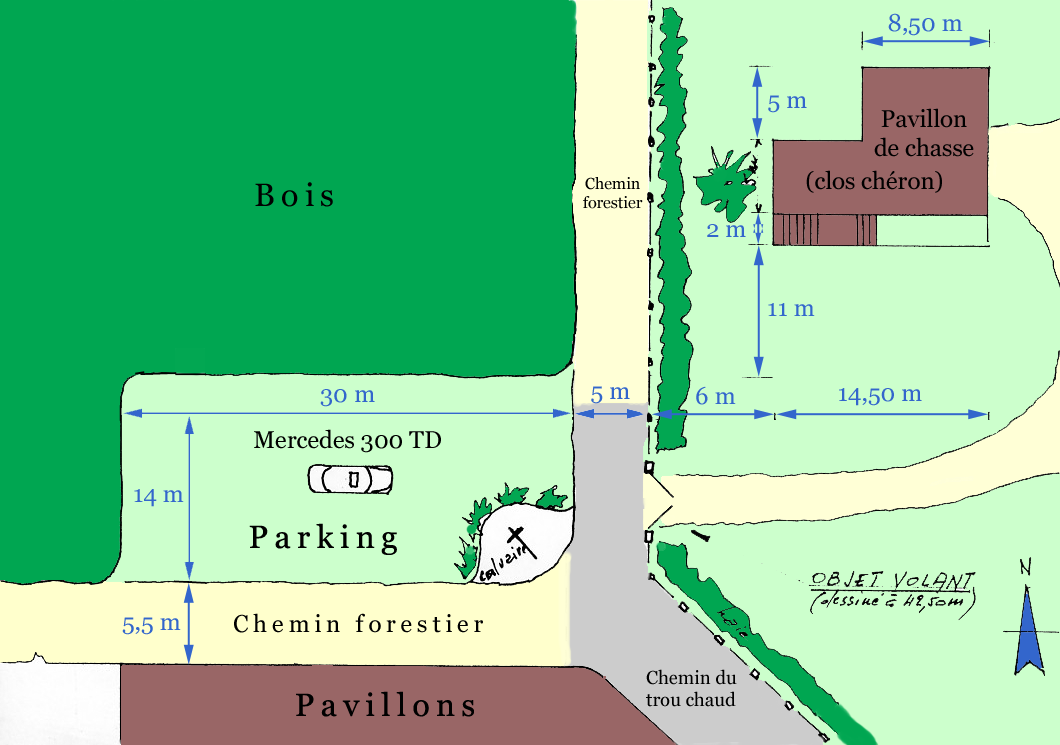
<style>
.page{position:relative;width:1060px;height:745px;background:#ccffcc}
.page>*{position:absolute;margin:0}
.t1{font:24px "Georgia";color:#3366cc}
.t2{font:24px "Georgia";color:#000000}
.t3{font:32px "Georgia";letter-spacing:0.2em;color:#000000}
.t4{font:16px "Georgia";color:#000000}
.t5{font:24px "Georgia";letter-spacing:0.2em;color:#000000}
.t6{font:18.7px "Georgia";color:#000000}
</style>
<div class="page">
<p class="t1" style="left:888px;top:13px;width:75px;height:23px">8,50 m</p>
<p class="t1" style="left:768px;top:95px;width:39px;height:18px">5 m</p>
<p class="t2" style="left:874px;top:108px;width:100px;height:49px;text-align:center">Pavillon<br>de chasse</p>
<p class="t2" style="left:806px;top:170px;width:136px;height:23px">(clos chéron)</p>
<p class="t3" style="left:255px;top:182px;width:78px;height:25px">Bois</p>
<p class="t4" style="left:583px;top:177px;width:60px;height:32px;text-align:center">Chemin<br>forestier</p>
<p class="t1" style="left:707px;top:224px;width:39px;height:13px">2 m</p>
<p class="t1" style="left:768px;top:303px;width:47px;height:13px">11 m</p>
<p class="t1" style="left:320px;top:389px;width:55px;height:18px">30 m</p>
<p class="t1" style="left:591px;top:386px;width:39px;height:18px">5 m</p>
<p class="t1" style="left:696px;top:386px;width:40px;height:19px">6 m</p>
<p class="t1" style="left:839px;top:388px;width:83px;height:18px">14,50 m</p>
<p class="t2" style="left:254px;top:429px;width:187px;height:24px">Mercedes 300 TD</p>
<p class="t1" style="left:134px;top:489px;width:50px;height:18px">14 m</p>
<p class="t3" style="left:249px;top:523px;width:148px;height:32px">Parking</p>
<p class="t1" style="left:122px;top:617px;width:59px;height:18px">5,5 m</p>
<p class="t5" style="left:234px;top:613px;width:249px;height:20px">Chemin forestier</p>
<p class="t6" style="left:646px;top:669px;width:91px;height:38px">Chemin du<br>trou chaud</p>
<p class="t3" style="left:296px;top:691px;width:178px;height:26px">Pavillons</p>
</div>
